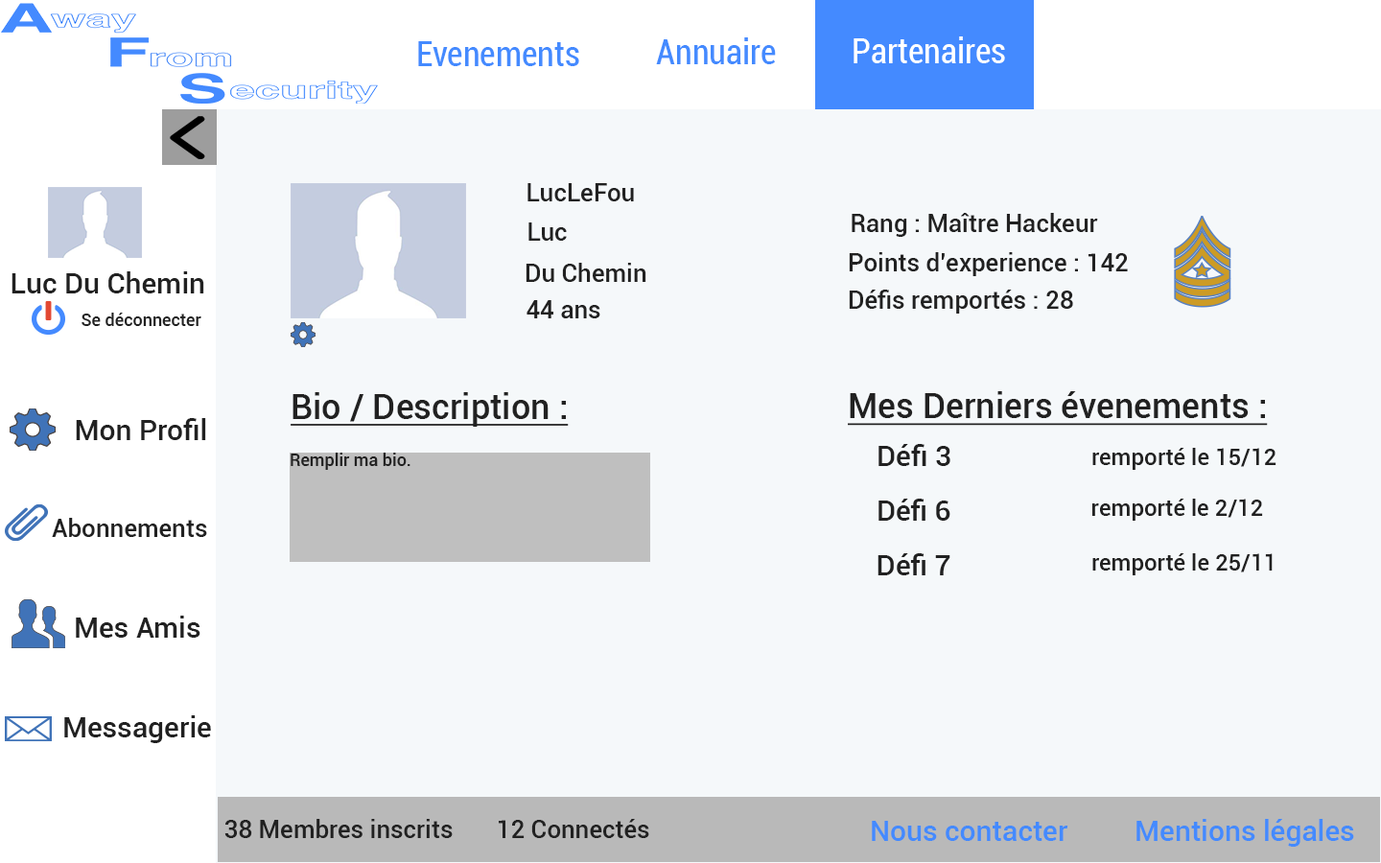
<style>
.page{position:relative;width:1381px;height:863px;background:#f5f8fa}
.page>*{position:absolute;margin:0}
.t1{font:34.5px "Roboto-Condensed";color:#448aff}
.t2{font:34.5px "Roboto-Condensed";color:#ffffff}
.t3{font:24.9px "Roboto-Medium";color:#212121}
.t4{font:28.8px "Roboto-Medium";color:#212121}
.t5{font:17.3px "Roboto-Medium";color:#212121}
.t6{font:34.5px "Roboto-Medium";color:#212121;text-decoration:underline}
.t7{font:23px "Roboto-Medium";color:#212121}
.t8{font:28.8px "Roboto-Medium";color:#448aff}
</style>
<div class="page">
<p class="t1" style="left:418px;top:41px;width:161px;height:25px">Evenements</p>
<p class="t1" style="left:656px;top:37px;width:120px;height:27px">Annuaire</p>
<p class="t2" style="left:854px;top:36px;width:151px;height:27px">Partenaires</p>
<p class="t3" style="left:528px;top:183px;width:106px;height:18px">LucLeFou</p>
<p class="t3" style="left:852px;top:213px;width:246px;height:24px">Rang : Maître Hackeur</p>
<p class="t3" style="left:529px;top:223px;width:38px;height:18px">Luc</p>
<p class="t3" style="left:849px;top:252px;width:279px;height:24px">Points d’experience : 142</p>
<p class="t3" style="left:526px;top:263px;width:121px;height:19px">Du Chemin</p>
<p class="t4" style="left:12px;top:271px;width:192px;height:23px">Luc Du Chemin</p>
<p class="t3" style="left:849px;top:290px;width:224px;height:24px">Défis remportés : 28</p>
<p class="t3" style="left:527px;top:300px;width:73px;height:18px">44 ans</p>
<p class="t5" style="left:82px;top:313px;width:119px;height:13px">Se déconnecter</p>
<p class="t6" style="left:291px;top:392px;width:278px;height:35px">Bio / Description :</p>
<p class="t6" style="left:848px;top:391px;width:420px;height:35px">Mes Derniers évenements :</p>
<p class="t4" style="left:76px;top:418px;width:130px;height:22px">Mon Profil</p>
<p class="t4" style="left:879px;top:444px;width:72px;height:22px">Défi 3</p>
<p class="t7" style="left:1093px;top:448px;width:184px;height:22px">remporté le 15/12</p>
<p class="t5" style="left:291px;top:453px;width:120px;height:17px">Remplir ma bio.</p>
<p class="t4" style="left:879px;top:499px;width:72px;height:22px">Défi 6</p>
<p class="t7" style="left:1093px;top:499px;width:170px;height:22px">remporté le 2/12</p>
<p class="t3" style="left:52px;top:518px;width:155px;height:19px">Abonnements</p>
<p class="t4" style="left:878px;top:553px;width:73px;height:23px">Défi 7</p>
<p class="t7" style="left:1093px;top:553px;width:180px;height:23px">remporté le 25/11</p>
<p class="t4" style="left:76px;top:616px;width:124px;height:22px">Mes Amis</p>
<p class="t4" style="left:64px;top:716px;width:147px;height:27px">Messagerie</p>
<p class="t3" style="left:224px;top:819px;width:425px;height:19px">38 Membres inscrits       12 Connectés</p>
<p class="t8" style="left:872px;top:821px;width:197px;height:20px">Nous contacter</p>
<p class="t8" style="left:1137px;top:819px;width:217px;height:28px">Mentions légales</p>
</div>
